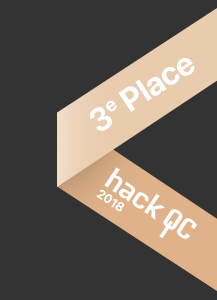
<style>
.page{position:relative;width:217px;height:300px;background:#333333}
.page>*{position:absolute;margin:0}
.t1{font:32.4px "SFProDisplay-Bold";color:#ffffff}
.t2{font:12.6px "SFProDisplay-Bold";color:#ffffff}
</style>
<div class="page">
<p class="t1" style="left:90px;top:58px;width:105px;height:73px;rotate:-33deg">3e Place</p>
<p class="t2" style="left:96px;top:189px;width:29px;height:23px;rotate:33deg">2018</p>
</div>
